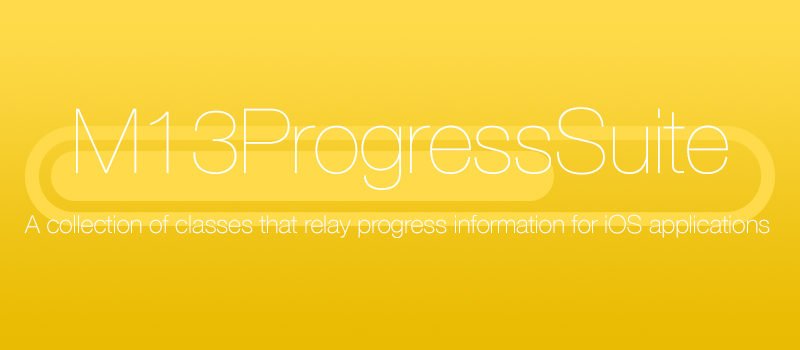
<style>
.page{position:relative;width:800px;height:350px}
.page>*{position:absolute;margin:0}
.t1{font:90px "HelveticaNeue-UltraLight";letter-spacing:-0.007em;color:#ffffff}
.t2{font:25px "HelveticaNeue-Thin";letter-spacing:-0.007em;color:#ffffff}
</style>
<div class="page">
<p class="t1" style="left:76px;top:107px;width:652px;height:83px">M13ProgressSuite</p>
<p class="t2" style="left:24px;top:214px;width:746px;height:24px">A collection of classes that relay progress information for iOS applications</p>
</div>
